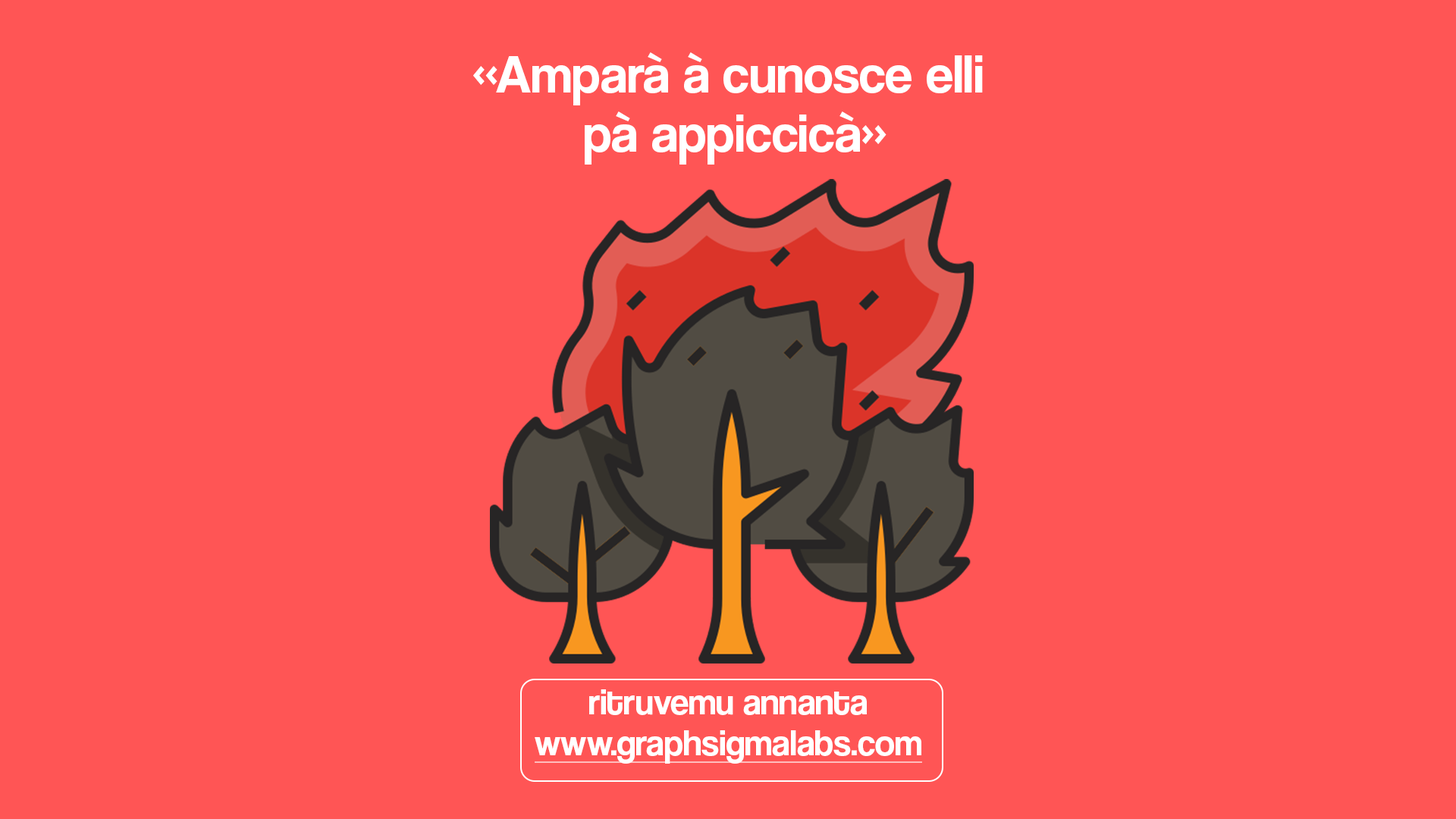
<style>
.page{position:relative;width:1456px;height:819px;background:#ff5555}
.page>*{position:absolute;margin:0}
.t1{font:54.6px/59.1px "CoolveticaRg-Regular";color:#ffffff}
.t2{font:36.4px "CoolveticaRg-Regular";color:#ffffff}
.t3{font:36.4px "CoolveticaRg-Regular";color:#ffffff;text-decoration:underline}
</style>
<div class="page">
<p class="t1" style="left:473px;top:52px;width:510px;height:113px;text-align:center">«Amparà à cunosce elli <br>pà appiccicà»</p>
<p class="t2" style="left:589px;top:689px;width:278px;height:26px">ritruvemu annanta</p>
<p class="t3" style="left:535px;top:730px;width:387px;height:34px">www.graphsigmalabs.com</p>
</div>
